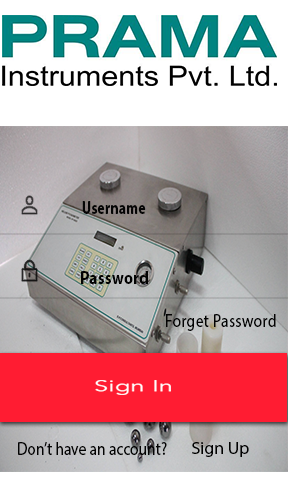
<style>
.page{position:relative;width:288px;height:504px;background:#ffffff}
.page>*{position:absolute;margin:0}
.t1{font:18.2px "MyriadPro-Bold";letter-spacing:0.014em;color:#000000;scale:0.76 1}
.t2{font:18.4px "MyriadPro-Bold";letter-spacing:0.014em;color:#030303;scale:0.86 1}
.t3{font:18.4px "MyriadPro-Regular";letter-spacing:0.014em;color:#030303;scale:0.86 1}
.t4{font:15.5px "Avenir-Book";letter-spacing:0.014em;color:#ffffff;scale:1.61 1}
.t5{font:18px "MyriadPro-Regular";color:#030303;scale:0.86 1}
.t6{font:17px "MyriadPro-Regular";color:#010101;scale:1.04 1}
</style>
<div class="page">
<p class="t1" style="left:82px;top:201px;width:64px;height:13px">Username</p>
<p class="t2" style="left:81px;top:271px;width:67px;height:13px">Password</p>
<p class="t3" style="left:166px;top:314px;width:110px;height:17px">Forget Password</p>
<p class="t4" style="left:95px;top:380px;width:76px;height:15px">Sign In</p>
<p class="t5" style="left:18px;top:442px;width:149px;height:13px">Don’t have an account?</p>
<p class="t6" style="left:192px;top:442px;width:57px;height:15px">Sign Up</p>
</div>
